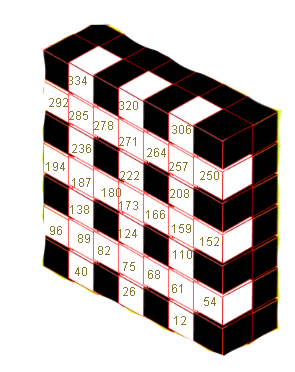
<style>
.page{position:relative;width:295px;height:372px;background:#ffffff}
.page>*{position:absolute;margin:0}
.t1{font:12px "ArialMT";color:#817931}
</style>
<div class="page">
<p class="t1" style="left:68px;top:76px;width:19px;height:9px">334</p>
<p class="t1" style="left:49px;top:98px;width:19px;height:9px">292</p>
<p class="t1" style="left:119px;top:101px;width:19px;height:9px">320</p>
<p class="t1" style="left:69px;top:111px;width:19px;height:9px">285</p>
<p class="t1" style="left:94px;top:121px;width:19px;height:9px">278</p>
<p class="t1" style="left:172px;top:125px;width:19px;height:9px">306</p>
<p class="t1" style="left:119px;top:137px;width:17px;height:9px">271</p>
<p class="t1" style="left:72px;top:144px;width:19px;height:9px">236</p>
<p class="t1" style="left:147px;top:148px;width:19px;height:9px">264</p>
<p class="t1" style="left:46px;top:162px;width:19px;height:9px">194</p>
<p class="t1" style="left:120px;top:171px;width:19px;height:9px">222</p>
<p class="t1" style="left:169px;top:162px;width:19px;height:9px">257</p>
<p class="t1" style="left:200px;top:171px;width:19px;height:9px">250</p>
<p class="t1" style="left:72px;top:178px;width:19px;height:9px">187</p>
<p class="t1" style="left:102px;top:188px;width:19px;height:9px">180</p>
<p class="t1" style="left:170px;top:189px;width:19px;height:9px">208</p>
<p class="t1" style="left:70px;top:205px;width:19px;height:9px">138</p>
<p class="t1" style="left:119px;top:201px;width:19px;height:9px">173</p>
<p class="t1" style="left:146px;top:210px;width:19px;height:9px">166</p>
<p class="t1" style="left:50px;top:226px;width:12px;height:9px">96</p>
<p class="t1" style="left:118px;top:229px;width:19px;height:9px">124</p>
<p class="t1" style="left:172px;top:224px;width:19px;height:9px">159</p>
<p class="t1" style="left:78px;top:234px;width:12px;height:9px">89</p>
<p class="t1" style="left:98px;top:246px;width:12px;height:9px">82</p>
<p class="t1" style="left:200px;top:237px;width:19px;height:9px">152</p>
<p class="t1" style="left:173px;top:250px;width:19px;height:9px">110</p>
<p class="t1" style="left:75px;top:267px;width:12px;height:9px">40</p>
<p class="t1" style="left:123px;top:262px;width:12px;height:9px">75</p>
<p class="t1" style="left:148px;top:270px;width:12px;height:9px">68</p>
<p class="t1" style="left:123px;top:287px;width:12px;height:9px">26</p>
<p class="t1" style="left:172px;top:284px;width:10px;height:9px">61</p>
<p class="t1" style="left:204px;top:297px;width:12px;height:9px">54</p>
<p class="t1" style="left:174px;top:316px;width:12px;height:9px">12</p>
</div>
